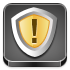
<style>
.page{position:relative;width:70px;height:70px}
.page>*{position:absolute;margin:0}
.t1{font:32.7px "Arial-BoldMT";color:#5f4204}
</style>
<div class="page">
<p class="t1" style="left:32px;top:19px;width:5px;height:24px">!</p>
</div>
